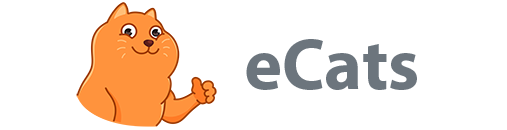
<style>
.page{position:relative;width:507px;height:130px;background:#ffffff}
.page>*{position:absolute;margin:0}
.t1{font:72px "MyriadPro-Bold";color:#6c757d}
</style>
<div class="page">
<p class="t1" style="left:246px;top:39px;width:171px;height:51px">eCats</p>
</div>
